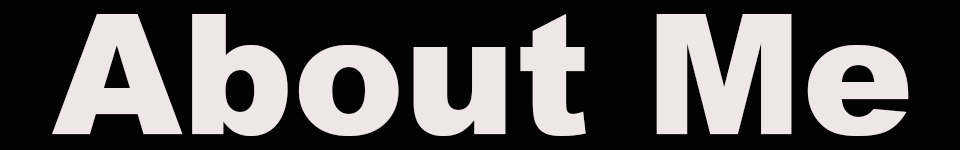
<style>
.page{position:relative;width:960px;height:150px;background:#020202}
.page>*{position:absolute;margin:0}
.t1{font:166.7px "Arial-Black";color:#efe7e7}
</style>
<div class="page">
<p class="t1" style="left:52px;top:14px;width:857px;height:122px">About Me</p>
</div>
